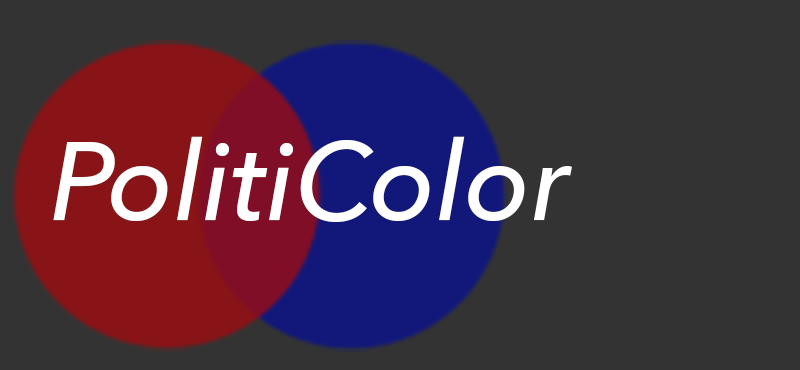
<style>
.page{position:relative;width:800px;height:370px;background:#333333}
.page>*{position:absolute;margin:0}
.t1{font:110px "AvenirNext-MediumItalic";color:#ffffff}
</style>
<div class="page">
<p class="t1" style="left:53px;top:136px;width:519px;height:86px">PolitiColor</p>
</div>
